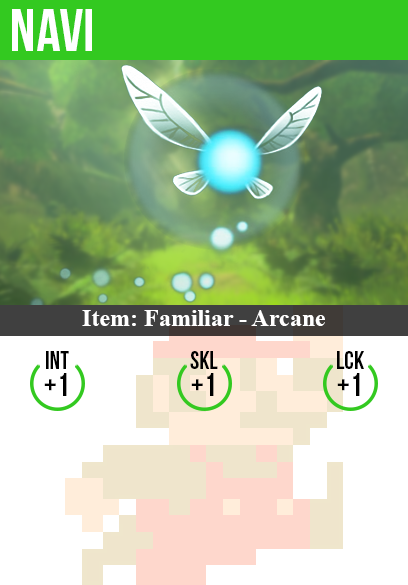
<style>
.page{position:relative;width:408px;height:585px;background:#ffffff}
.page>*{position:absolute;margin:0}
.t1{font:60px "BebasNeue";color:#ffffff}
.t2{font:24px "TimesNewRomanPS-BoldMT";color:#ffffff}
.t3{font:25px "BebasNeue";color:#000000}
.t4{font:32px "BebasNeue";color:#000000}
</style>
<div class="page">
<p class="t1" style="left:12px;top:9px;width:80px;height:42px">navi</p>
<p class="t2" style="left:82px;top:310px;width:243px;height:16px">Item: Familiar - Arcane</p>
<p class="t3" style="left:46px;top:351px;width:23px;height:18px">int</p>
<p class="t3" style="left:190px;top:351px;width:28px;height:18px">skl</p>
<p class="t3" style="left:337px;top:351px;width:27px;height:18px">lck</p>
<p class="t4" style="left:44px;top:373px;width:23px;height:23px">+1</p>
<p class="t4" style="left:191px;top:373px;width:23px;height:23px">+1</p>
<p class="t4" style="left:337px;top:373px;width:23px;height:23px">+1</p>
</div>
